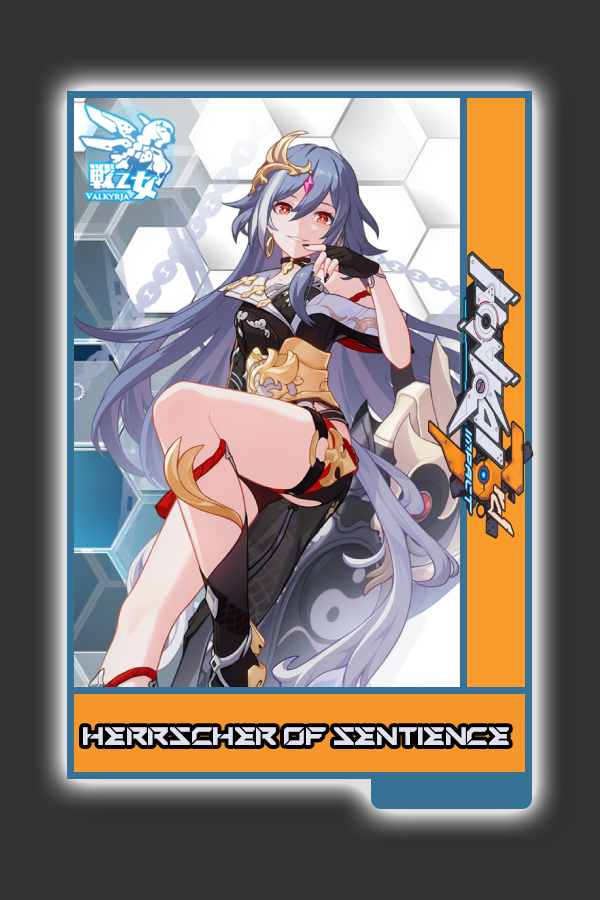
<style>
.page{position:relative;width:600px;height:900px;background:#333333}
.page>*{position:absolute;margin:0}
.t1{font:17.7px "Mechsuit";color:#e2e2ef}
</style>
<div class="page">
<p class="t1" style="left:83px;top:727px;width:426px;height:18px">herrscher of sentience</p>
</div>
